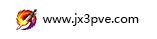
<style>
.page{position:relative;width:157px;height:39px;background:#ffffff}
.page>*{position:absolute;margin:0}
.t1{font:12px "MicrosoftYaHei";color:#000000}
</style>
<div class="page">
<p class="t1" style="left:42px;top:13px;width:97px;height:13px">www.jx3pve.com</p>
</div>
